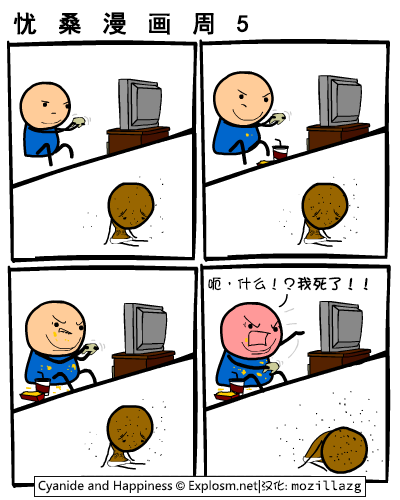
<style>
.page{position:relative;width:400px;height:500px;background:#ffffff}
.page>*{position:absolute;margin:0}
.t1{font:24px "SimHei";letter-spacing:0.84em;color:#000000;font-weight:bold}
.t2{font:15px "DFGirl";color:#000000}
.t3{font:15px "DFGirl";color:#000000;font-weight:bold}
</style>
<div class="page">
<p class="t1" style="left:13px;top:12px;width:236px;height:23px">忧桑漫画周5</p>
<p class="t2" style="left:208px;top:276px;width:160px;height:15px">呃，什么！？<span class="t3">我死了！！</span></p>
</div>
